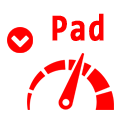
<style>
.page{position:relative;width:120px;height:120px;background:#ffffff}
.page>*{position:absolute;margin:0}
.t1{font:38px "Consolas-Bold";letter-spacing:0.05em;color:#ff0000;font-weight:bold;scale:0.8 1}
</style>
<div class="page">
<p class="t1" style="left:52px;top:13px;width:52px;height:28px">Pad</p>
</div>
